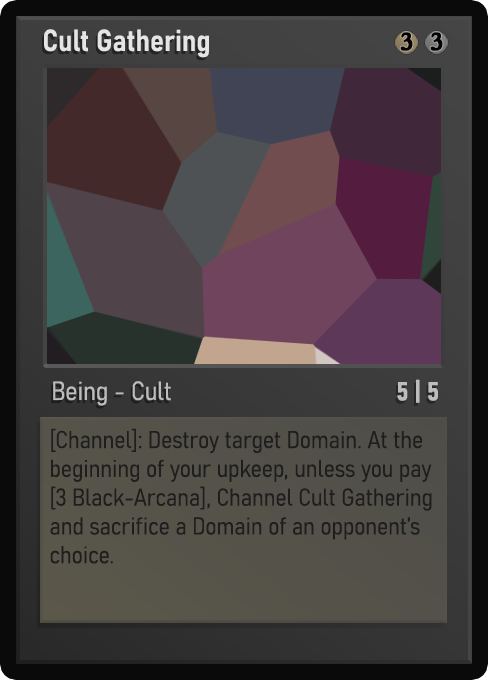
<style>
.page{position:relative;width:488px;height:680px}
.page>*{position:absolute;margin:0}
.t1{font:30px "Bahnschrift-SemiBoldSemiCondensed";color:#f2f2f2;font-weight:bold}
.t2{font:25px "WTRRoycroft";color:#000000;font-weight:bold;scale:1.09 1}
.t3{font:26px "Bahnschrift-LightSemiCondensed";color:#c8c8c8;font-weight:bold}
.t4{font:26px "Bahnschrift-BoldSemiCondensed";color:#bdbdbd;font-weight:bold}
.t5{font:24px "Bahnschrift-LightSemiCondensed";color:#1e1e1e;font-weight:bold}
</style>
<div class="page">
<p class="t1" style="left:44px;top:29px;width:165px;height:29px;opacity:0.9">Cult Gathering</p>
<p class="t2" style="left:400px;top:32px;width:13px;height:19px">3</p>
<p class="t2" style="left:430px;top:32px;width:13px;height:19px">3</p>
<p class="t3" style="left:53px;top:381px;width:118px;height:25px;opacity:0.9">Being - Cult</p>
<p class="t4" style="left:397px;top:379px;width:41px;height:24px">5 | 5</p>
<p class="t5" style="left:50px;top:428px;width:382px;height:136px">[Channel]: Destroy target Domain. At the beginning of your upkeep, unless you pay [3 Black-Arcana], Channel Cult Gathering and sacrifice a Domain of an opponent’s choice.</p>
</div>
